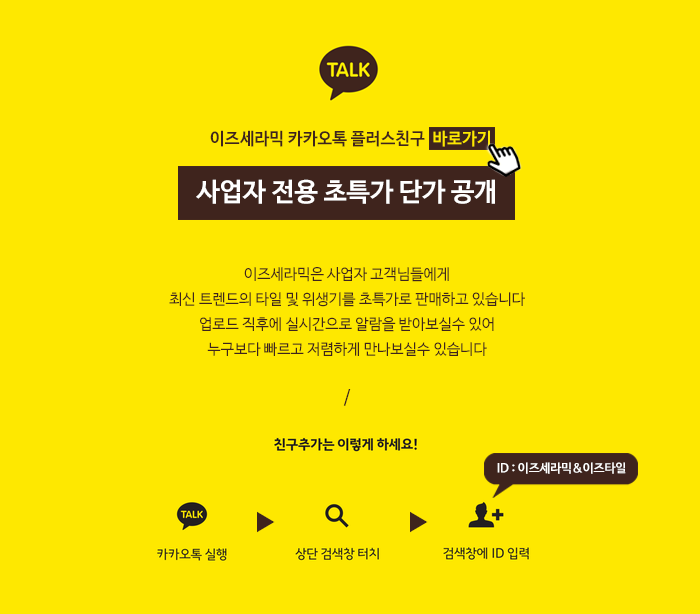
<style>
.page{position:relative;width:700px;height:614px;background:#fee800}
.page>*{position:absolute;margin:0}
.t1{font:16.9px "NanumBarunGothicBold";color:#3f241d}
.t2{font:16.9px "NanumBarunGothicBold";color:#fee800}
.t3{font:25.8px "NanumBarunGothicBold";color:#ffffff}
.t4{font:15px/25.2px "NanumBarunGothic";color:#3f241d}
.t5{font:17.7px "NanumBarunGothic";color:#3f241d}
.t6{font:12.3px "NanumBarunGothicBold";color:#ffffff}
.t7{font:23px "NanumBarunGothic";color:#3f241d}
</style>
<div class="page">
<p class="t1" style="left:210px;top:130px;width:280px;height:17px">이즈세라믹 카카오톡 플러스친구  <span class="t2">바로가기</span></p>
<p class="t3" style="left:196px;top:179px;width:299px;height:25px">사업자 전용 초특가 단가 공개</p>
<p class="t4" style="left:169px;top:267px;width:356px;height:89px;text-align:center">이즈세라믹은 사업자 고객님들에게<br>최신 트렌드의 타일 및 위생기를 초특가로 판매하고 있습니다<br>업로드 직후에 실시간으로 알람을 받아보실수 있어<br>누구보다 빠르고 저렴하게 만나보실수 있습니다</p>
<p class="t5" style="left:343px;top:389px;width:8px;height:17px">/</p>
<p class="t6" style="left:497px;top:462px;width:129px;height:12px">ID : 이즈세라믹&amp;이즈타일</p>
<p class="t7" style="left:257px;top:511px;width:18px;height:22px">▶</p>
<p class="t7" style="left:410px;top:511px;width:18px;height:22px">▶</p>
</div>
